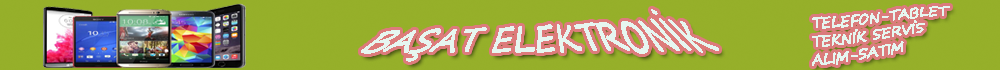
<style>
.page{position:relative;width:1000px;height:70px;background:#96af2a}
.page>*{position:absolute;margin:0}
.t1{font:14px "SegoePrint";color:#e6f6f0}
.t2{font:36.8px "SegoePrint";color:#e6f6f0;scale:0.87 1}
</style>
<div class="page">
<p class="t1" style="left:812px;top:6px;width:138px;height:60px">TELEFON-TABLET <br>TEKNİK SERVİS<br>ALIM-SATIM</p>
<p class="t2" style="left:361px;top:9px;width:358px;height:53px">BAŞAT ELEKTRONİK</p>
</div>
